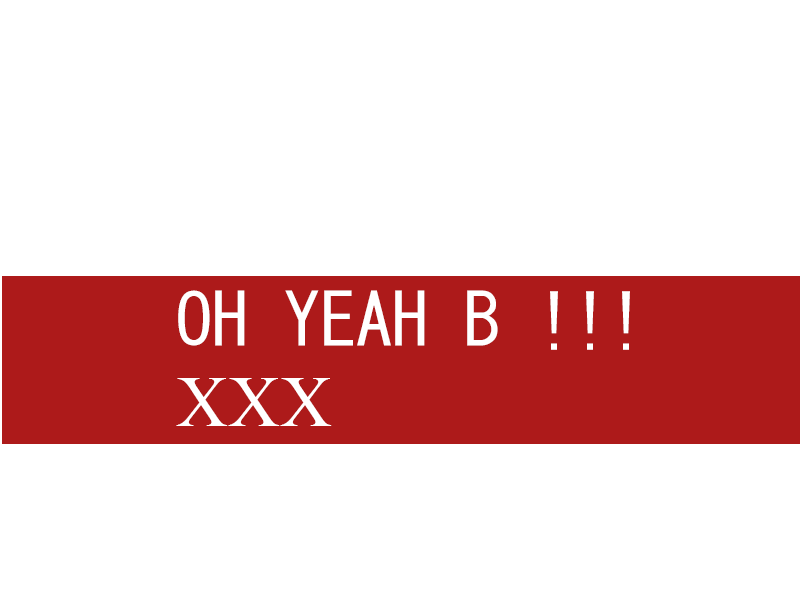
<style>
.page{position:relative;width:800px;height:600px;background:#ffffff}
.page>*{position:absolute;margin:0}
.t1{font:72px "MS-Gothic";color:#ffffff}
.t2{font:72px "TimesNewRomanPSMT";color:#ffffff}
</style>
<div class="page">
<p class="t1" style="left:178px;top:290px;width:452px;height:60px">OH YEAH B !!!</p>
<p class="t2" style="left:176px;top:378px;width:156px;height:48px">XXX</p>
</div>
